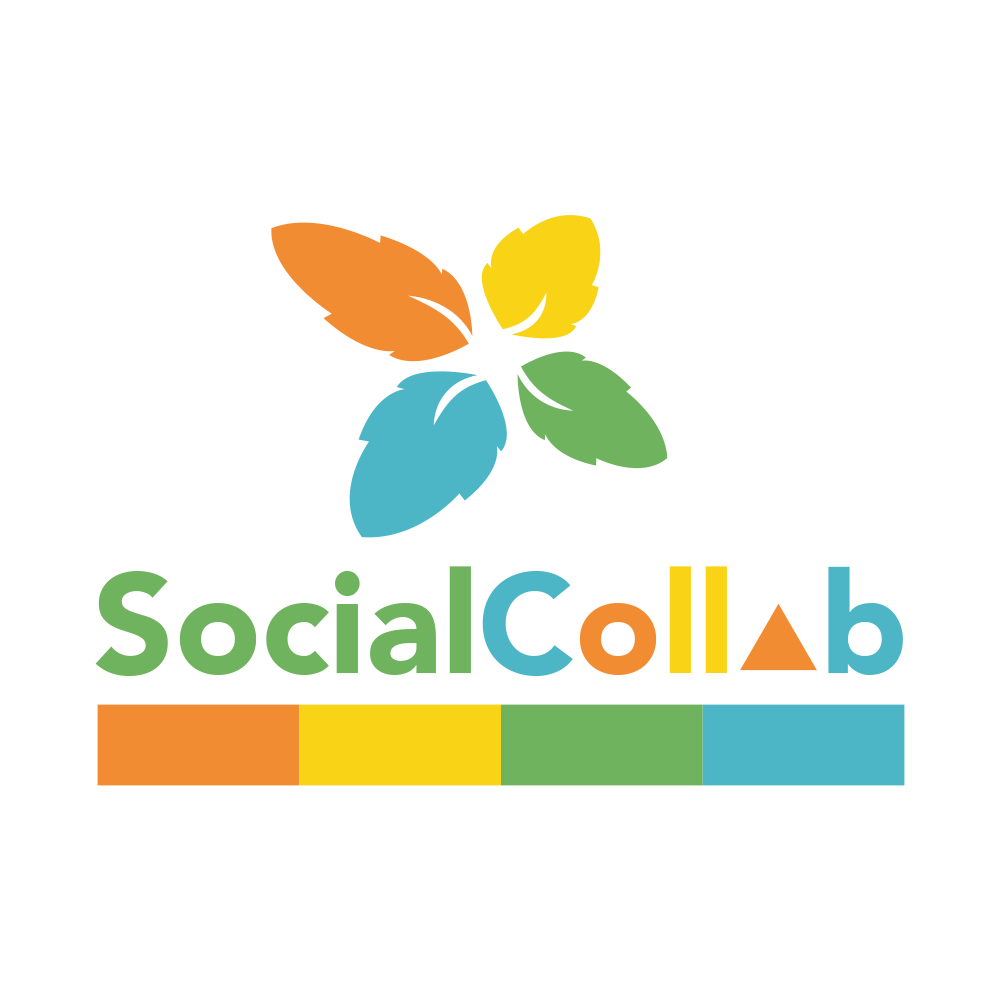
<style>
.page{position:relative;width:1000px;height:1000px;background:#ffffff}
.page>*{position:absolute;margin:0}
.t1{font:141.5px "Avenir-Black";color:#6fb35e}
.t2{font:141.5px "Avenir-Black";color:#4cb6c6}
.t3{font:141.5px "Avenir-Black";color:#f28c33}
.t4{font:141.5px "Avenir-Black";color:#f9d315}
</style>
<div class="page">
<p class="t1" style="left:95px;top:566px;width:808px;height:110px">Social<span class="t2">C</span><span class="t3">o</span><span class="t4">ll  </span><span class="t2">b</span></p>
</div>
